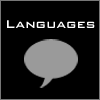
<style>
.page{position:relative;width:100px;height:100px;background:#000000}
.page>*{position:absolute;margin:0}
.t1{font:15px "BankGothicBT-Medium";color:#ffffff}
</style>
<div class="page">
<p class="t1" style="left:7px;top:20px;width:88px;height:8px">Languages</p>
</div>
